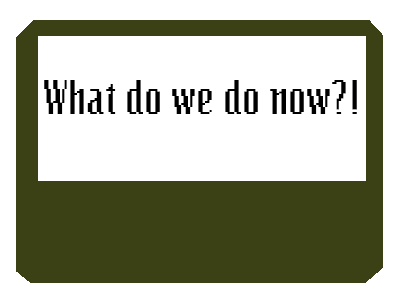
<style>
.page{position:relative;width:400px;height:300px;background:#ffffff}
.page>*{position:absolute;margin:0}
.t1{font:48px "Bitmap";color:#000000}
</style>
<div class="page">
<p class="t1" style="left:44px;top:80px;width:313px;height:34px">What do we do now?!</p>
</div>
